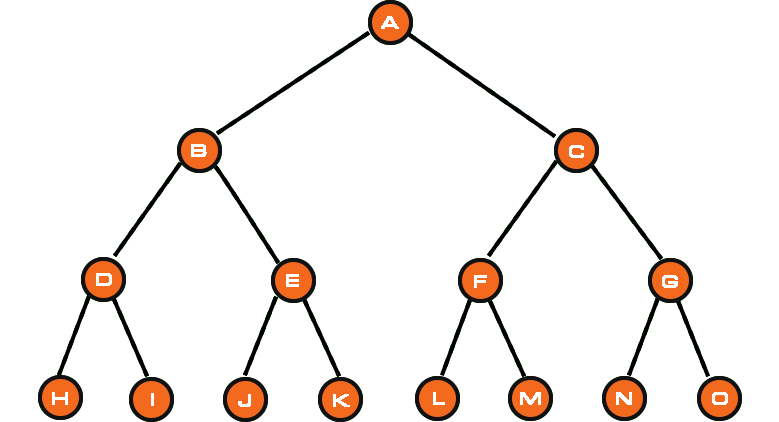
<style>
.page{position:relative;width:779px;height:422px;background:#ffffff}
.page>*{position:absolute;margin:0}
.t1{font:25px "PSLNatrinthornExtra";color:#ffffff;font-weight:bold}
</style>
<div class="page">
<p class="t1" style="left:381px;top:16px;width:18px;height:13px">A</p>
<p class="t1" style="left:381px;top:16px;width:18px;height:13px">A</p>
<p class="t1" style="left:191px;top:144px;width:16px;height:13px">B</p>
<p class="t1" style="left:191px;top:144px;width:16px;height:13px">B</p>
<p class="t1" style="left:569px;top:145px;width:15px;height:13px">C</p>
<p class="t1" style="left:569px;top:145px;width:15px;height:13px">C</p>
<p class="t1" style="left:96px;top:273px;width:16px;height:13px">D</p>
<p class="t1" style="left:96px;top:273px;width:16px;height:13px">D</p>
<p class="t1" style="left:286px;top:274px;width:13px;height:13px">E</p>
<p class="t1" style="left:286px;top:274px;width:13px;height:13px">E</p>
<p class="t1" style="left:474px;top:275px;width:13px;height:13px">F</p>
<p class="t1" style="left:474px;top:275px;width:13px;height:13px">F</p>
<p class="t1" style="left:662px;top:275px;width:16px;height:13px">G</p>
<p class="t1" style="left:662px;top:275px;width:16px;height:13px">G</p>
<p class="t1" style="left:52px;top:392px;width:16px;height:13px">H</p>
<p class="t1" style="left:52px;top:392px;width:16px;height:13px">H</p>
<p class="t1" style="left:238px;top:394px;width:13px;height:13px">J</p>
<p class="t1" style="left:238px;top:394px;width:13px;height:13px">J</p>
<p class="t1" style="left:333px;top:394px;width:17px;height:13px">K</p>
<p class="t1" style="left:333px;top:394px;width:17px;height:13px">K</p>
<p class="t1" style="left:433px;top:392px;width:12px;height:13px">L</p>
<p class="t1" style="left:433px;top:392px;width:12px;height:13px">L</p>
<p class="t1" style="left:520px;top:392px;width:21px;height:13px">M</p>
<p class="t1" style="left:520px;top:392px;width:21px;height:13px">M</p>
<p class="t1" style="left:616px;top:392px;width:16px;height:13px">N</p>
<p class="t1" style="left:616px;top:392px;width:16px;height:13px">N</p>
<p class="t1" style="left:712px;top:392px;width:16px;height:13px">O</p>
<p class="t1" style="left:712px;top:392px;width:16px;height:13px">O</p>
</div>
